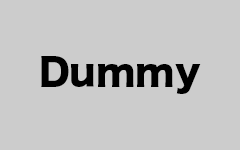
<style>
.page{position:relative;width:240px;height:150px;background:#cccccc}
.page>*{position:absolute;margin:0}
.t1{font:36px "HiraKakuStd-W8";color:#000000}
</style>
<div class="page">
<p class="t1" style="left:41px;top:56px;width:160px;height:38px">Dummy</p>
</div>
